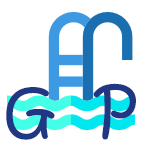
<style>
.page{position:relative;width:142px;height:142px;background:#ffffff}
.page>*{position:absolute;margin:0}
.t1{font:60px "KristenITC-Regular";letter-spacing:0.025em;color:#203784}
</style>
<div class="page">
<p class="t1" style="left:6px;top:83px;width:130px;height:57px">G  P</p>
</div>
